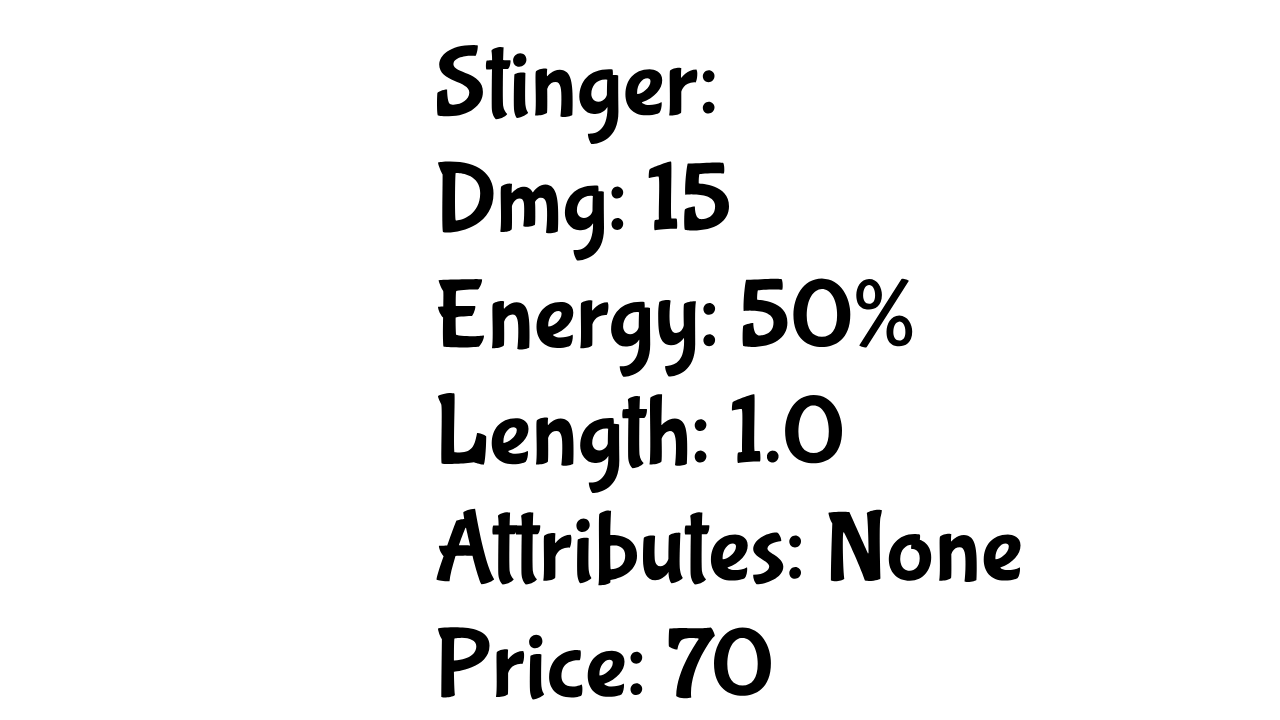
<style>
.page{position:relative;width:1280px;height:720px;background:#ffffff}
.page>*{position:absolute;margin:0}
.t1{font:100px "BubblegumSans-Regular";color:#000000}
</style>
<div class="page">
<p class="t1" style="left:436px;top:45px;width:585px;height:655px">Stinger:<br>Dmg: 15<br>Energy: 50%<br>Length: 1.0 <br>Attributes: None<br>Price: 70</p>
</div>
